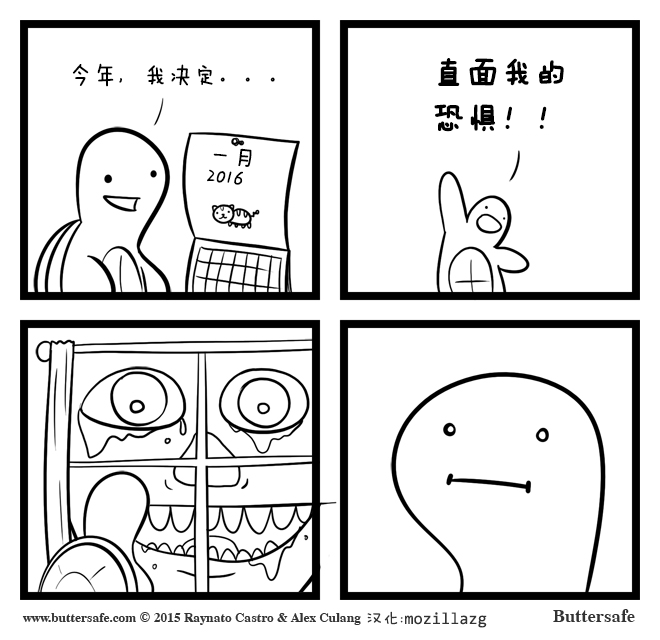
<style>
.page{position:relative;width:660px;height:640px;background:#ffffff}
.page>*{position:absolute;margin:0}
.t1{font:25px "FZMWJW--GB1-0";color:#000000}
.t2{font:33.3px/45.8px "FZMWJW--GB1-0";color:#000000;font-weight:bold}
.t3{font:25px/20.8px "FZMWJW--GB1-0";color:#000000}
.t4{font:16.7px "YaHei-Consolas-Hybrid";color:#333333}
.t5{font:16.7px "FZMWJW--GB1-0";color:#333333}
</style>
<div class="page">
<p class="t1" style="left:72px;top:63px;width:203px;height:24px">今年，我决定。。。</p>
<p class="t2" style="left:434px;top:58px;width:130px;height:74px">直面我的<br>恐惧！！</p>
<p class="t3" style="left:207px;top:148px;width:45px;height:37px;rotate:6deg">一月<br>2016</p>
<p class="t4" style="left:367px;top:611px;width:120px;height:17px"><span class="t5">汉化:</span>mozillazg</p>
</div>
